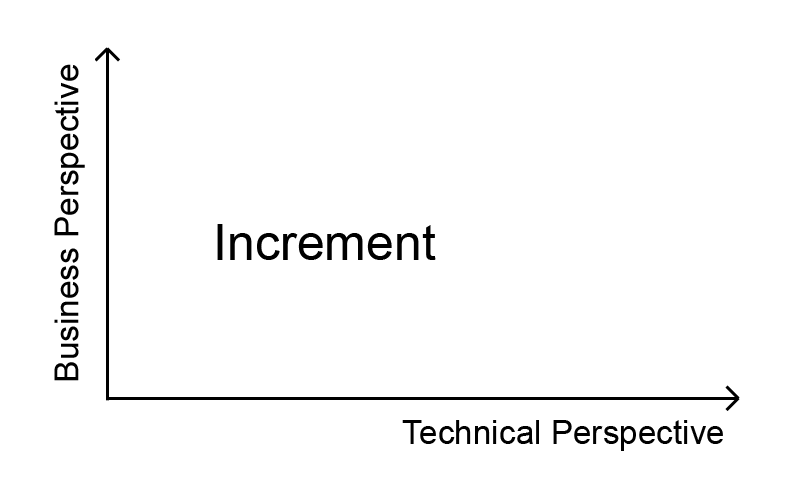
<style>
.page{position:relative;width:800px;height:500px;background:#ffffff}
.page>*{position:absolute;margin:0}
.t1{font:33.3px "ArialMT";color:#000000}
.t2{font:50px "ArialMT";color:#000000}
</style>
<div class="page">
<p class="t1" style="left:54px;top:64px;width:31px;height:317px;rotate:-90deg">Business Perspective</p>
<p class="t2" style="left:217px;top:224px;width:219px;height:36px">Increment</p>
<p class="t1" style="left:402px;top:420px;width:321px;height:31px">Technical Perspective</p>
</div>
